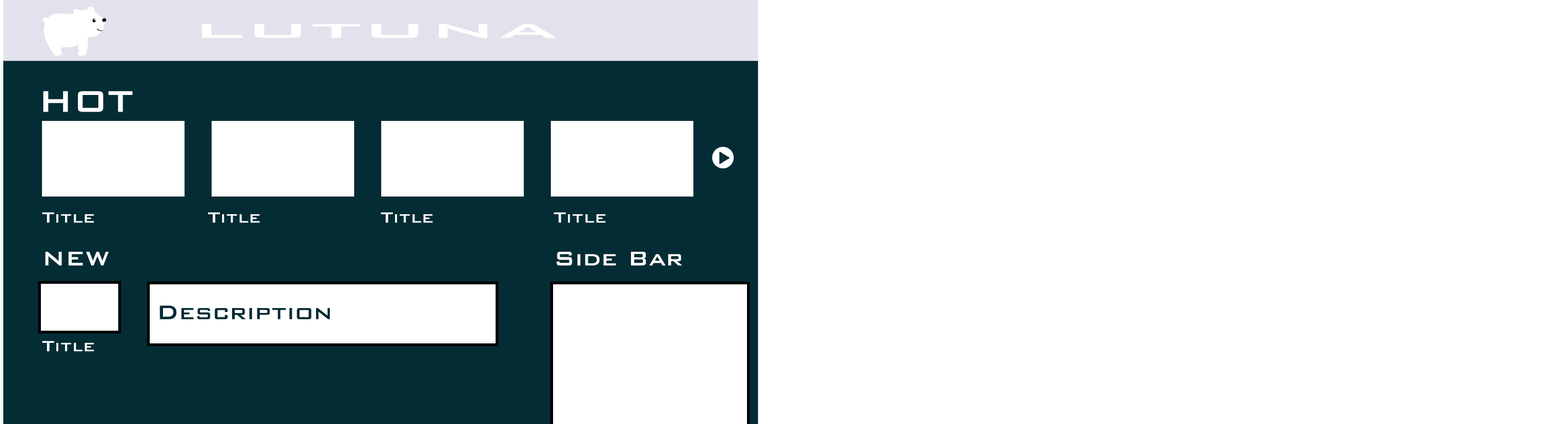
<style>
.page{position:relative;width:1568px;height:424px;background:#ffffff}
.page>*{position:absolute;margin:0}
.t1{font:26.5px "BankGothicBold";color:#ffffff;scale:3 1}
.t2{font:39.8px "BankGothicBold";color:#ffffff}
.t3{font:26.5px "BankGothicBold";color:#ffffff}
.t4{font:26.5px "BankGothicBold";color:#042c34}
</style>
<div class="page">
<p class="t1" style="left:202px;top:24px;width:354px;height:14px">LUTUNA</p>
<p class="t2" style="left:43px;top:91px;width:90px;height:21px">HOT</p>
<p class="t3" style="left:45px;top:252px;width:64px;height:14px">NEW</p>
<p class="t3" style="left:556px;top:252px;width:126px;height:14px">Side Bar</p>
<p class="t4" style="left:160px;top:306px;width:170px;height:14px">Description</p>
</div>
